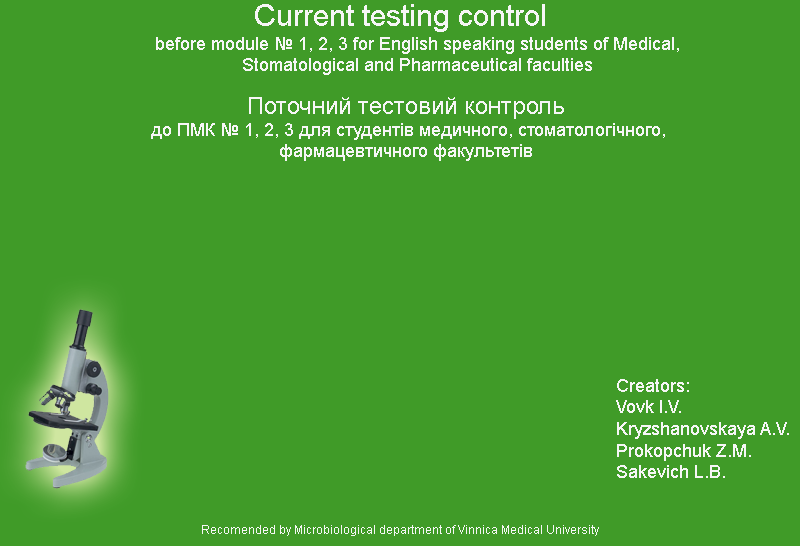
<style>
.page{position:relative;width:800px;height:546px;background:#409b28}
.page>*{position:absolute;margin:0}
.t1{font:30px "ArialMT";color:#f6f6f6}
.t2{font:18px "ArialMT";color:#f6f6f6}
.t3{font:24px "ArialMT";color:#f6f6f6}
.t4{font:12px "ArialMT";color:#f6f6f6}
</style>
<div class="page">
<p class="t1" style="left:255px;top:4px;width:290px;height:28px">Current testing control</p>
<p class="t2" style="left:156px;top:37px;width:523px;height:38px;text-align:center">before module № 1, 2, 3 for English speaking students of Medical, Stomatological and Pharmaceutical faculties</p>
<p class="t2" style="left:151px;top:97px;width:514px;height:64px;text-align:center"><span class="t3">Поточний тестовий контроль<br></span> до ПМК № 1, 2, 3 для студентів медичного, стоматологічного, фармацевтичного факультетів</p>
<p class="t2" style="left:616px;top:379px;width:173px;height:99px">Creators:<br>Vovk I.V.<br>Kryzshanovskaya A.V.<br>Prokopchuk Z.M.<br>Sakevich L.B.</p>
<p class="t4" style="left:202px;top:525px;width:397px;height:11px">Recomended by Microbiological department of Vinnica Medical University</p>
</div>
